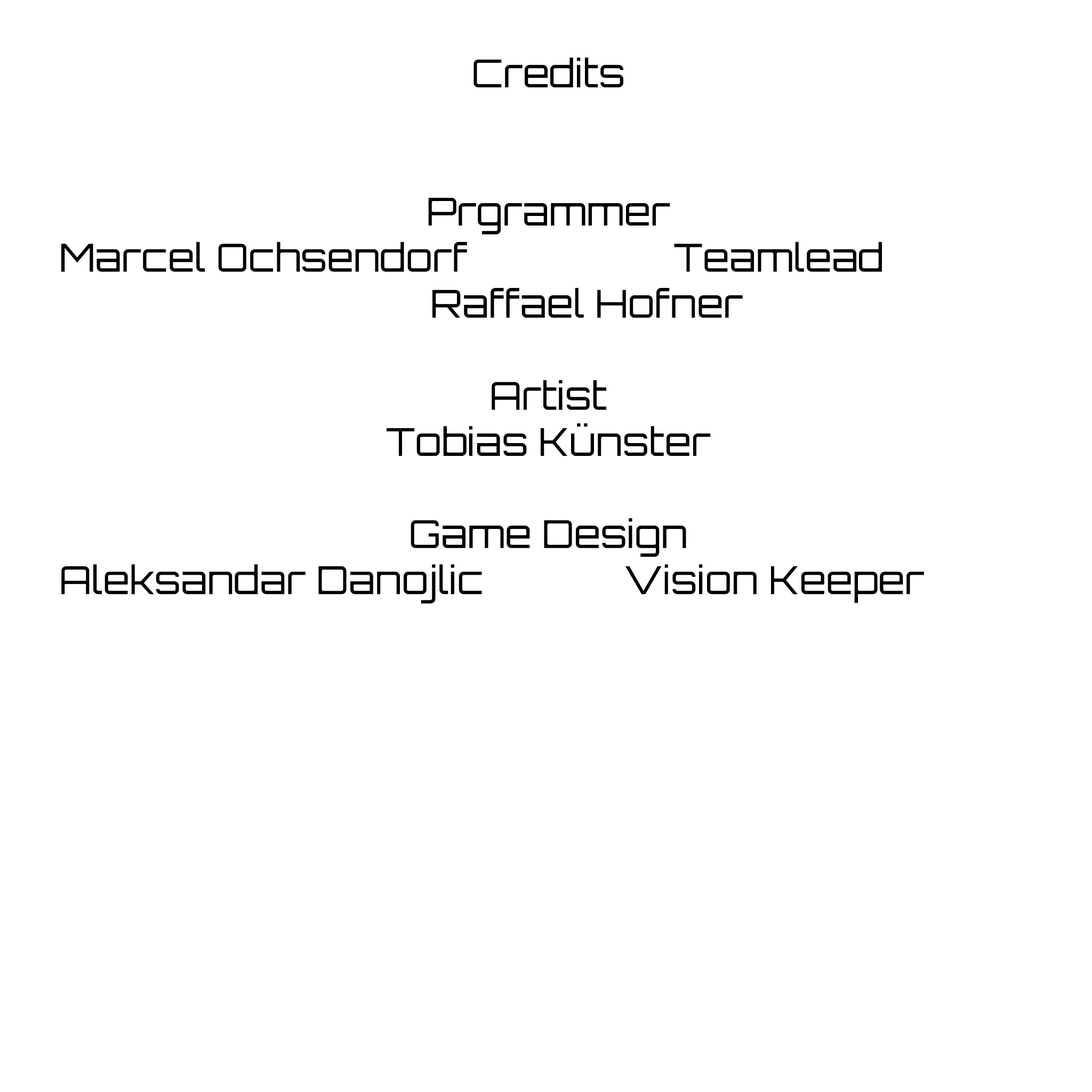
<style>
.page{position:relative;width:1092px;height:1092px;background:#ffffff}
.page>*{position:absolute;margin:0}
.t1{font:38.4px "Orbitron-Light";color:#000000}
</style>
<div class="page">
<p class="t1" style="left:61px;top:58px;width:863px;height:546px;text-align:center">Credits<br><br><br>Prgrammer<br>Marcel Ochsendorf    Teamlead<br>     Raffael Hofner<br><br>Artist<br>Tobias Künster<br><br>Game Design<br>Aleksandar Danojlic  Vision Keeper</p>
</div>
